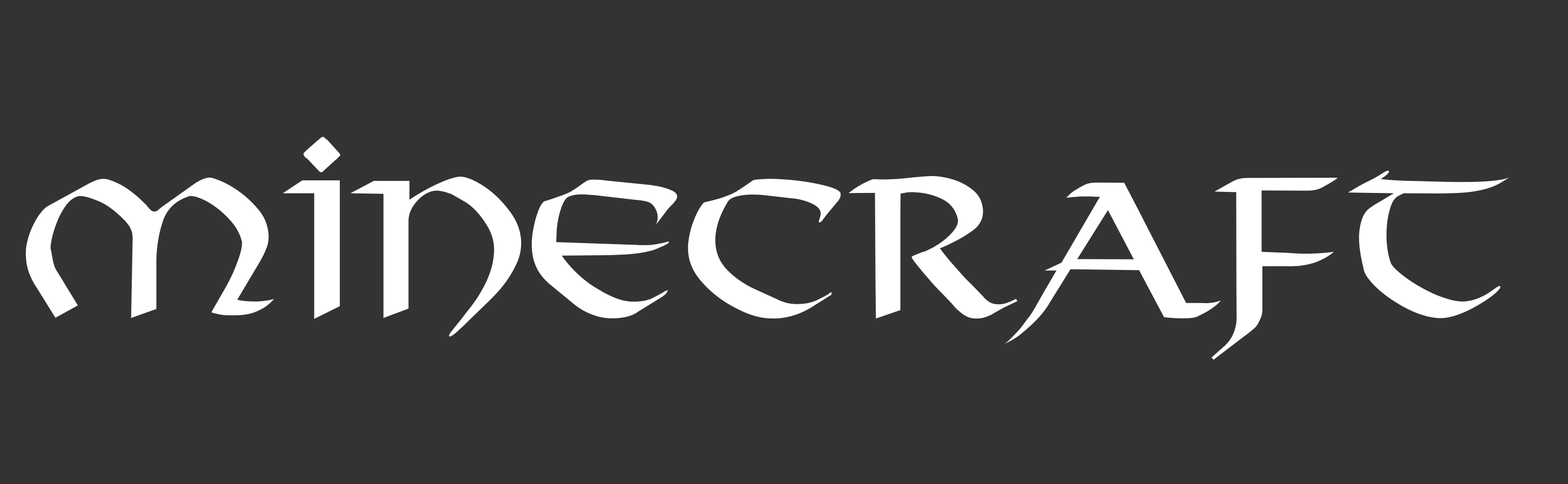
<style>
.page{position:relative;width:1568px;height:484px;background:#333333}
.page>*{position:absolute;margin:0}
.t1{font:186.6px "Viking-Normal";color:#ffffff}
</style>
<div class="page">
<p class="t1" style="left:25px;top:136px;width:1485px;height:224px">MineCraFt</p>
</div>
